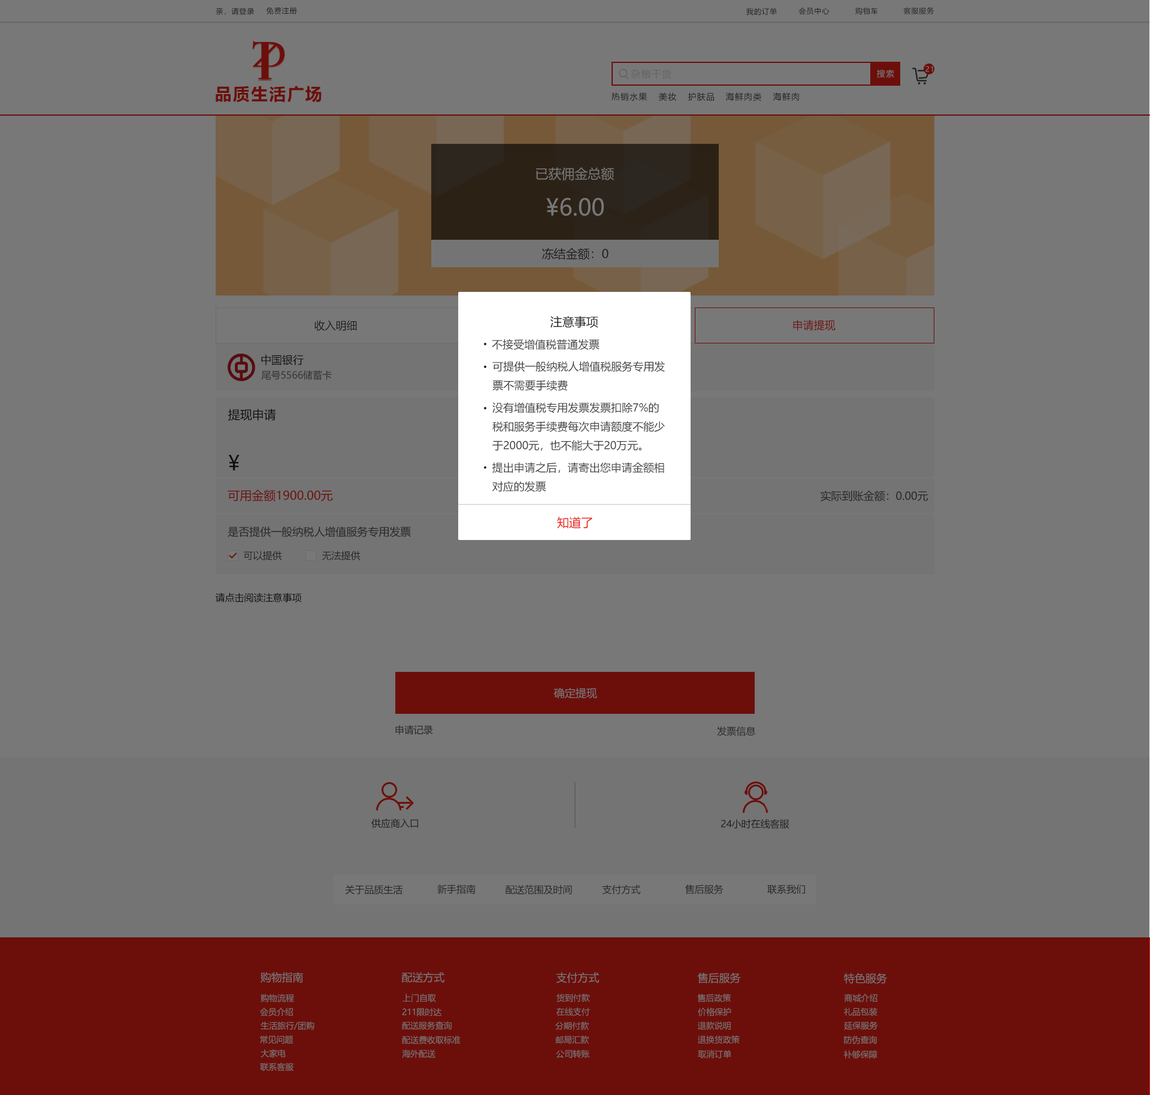
<style>
.page{position:relative;width:1150px;height:1095px;background:#787878}
.page>*{position:absolute;margin:0}
.t1{font:7.2px "MicrosoftYaHei";letter-spacing:0.08em;color:#1e1e1e}
.t2{font:7.2px "MicrosoftYaHei";letter-spacing:0.08em;color:#787878}
.t3{font:9.6px "MicrosoftYaHei";letter-spacing:0.08em;color:#656565}
.t4{font:8.4px "MicrosoftYaHei";letter-spacing:0.08em;color:#787878}
.t5{font:16.8px "MicrosoftYaHei-Bold";letter-spacing:0.08em;color:#6c0f0b}
.t6{font:8.4px "MicrosoftYaHei";letter-spacing:0.08em;color:#1e1e1e}
.t7{font:13.2px "MicrosoftYaHei";color:#787878}
.t8{font:22.8px "MicrosoftYaHei";color:#787878}
.t9{font:12px "MicrosoftYaHei";color:#1e1e1e}
.t10{font:12px "MicrosoftYaHei";color:#202020;text-transform:uppercase}
.t11{font:10.8px "MicrosoftYaHei";color:#1e1e1e}
.t12{font:10.8px "MicrosoftYaHei";color:#6c0f0b}
.t13{font:10.8px "MicrosoftYaHei";color:#404040;text-transform:uppercase}
.t14{font:10.8px "MicrosoftYaHei";color:#202020}
.t15{font:9.6px "MicrosoftYaHei";color:#303030}
.t16{font:12px "MicrosoftYaHei";color:#202020}
.t17{font:20.4px "MicrosoftYaHei";color:#202020}
.t18{font:12px "MicrosoftYaHei";color:#6c0f0b}
.t19{font:10.8px "MicrosoftYaHei";color:#262626}
.t20{font:12px "MicrosoftYaHei";color:#e61f18;text-transform:uppercase}
.t21{font:9.6px "MicrosoftYaHei";color:#262626}
.t22{font:9.6px "MicrosoftYaHei";color:#202020}
.t23{font:10.8px "MicrosoftYaHei";color:#787878}
.t24{font:9.6px "MicrosoftYaHei";color:#1e1e1e}
.t25{font:8.4px "MicrosoftYaHei";color:#787878}
</style>
<div class="page">
<p class="t1" style="left:216px;top:7px;width:38px;height:8px">亲，请登录</p>
<p class="t1" style="left:266px;top:7px;width:31px;height:7px">免费注册</p>
<p class="t1" style="left:747px;top:8px;width:30px;height:7px">我的订单</p>
<p class="t1" style="left:799px;top:7px;width:31px;height:8px">会员中心</p>
<p class="t1" style="left:856px;top:7px;width:22px;height:8px">购物车</p>
<p class="t1" style="left:904px;top:7px;width:31px;height:7px">客服服务</p>
<p class="t2" style="left:926px;top:66px;width:8px;height:6px">21</p>
<p class="t3" style="left:631px;top:69px;width:41px;height:10px">杂粮干货</p>
<p class="t4" style="left:877px;top:70px;width:18px;height:8px">搜索</p>
<p class="t5" style="left:216px;top:86px;width:106px;height:16px">品质生活广场</p>
<p class="t6" style="left:612px;top:92px;width:36px;height:9px">热销水果</p>
<p class="t6" style="left:659px;top:92px;width:17px;height:9px">美妆</p>
<p class="t6" style="left:688px;top:92px;width:26px;height:9px">护肤品</p>
<p class="t6" style="left:726px;top:92px;width:36px;height:9px">海鲜肉类</p>
<p class="t6" style="left:773px;top:92px;width:26px;height:9px">海鲜肉</p>
<p class="t7" style="left:536px;top:167px;width:78px;height:13px">已获佣金总额</p>
<p class="t8" style="left:546px;top:198px;width:58px;height:18px">¥6.00</p>
<p class="t9" style="left:542px;top:247px;width:67px;height:13px">冻结金额：0</p>
<p class="t10" style="left:551px;top:316px;width:48px;height:12px">注意事项</p>
<p class="t11" style="left:315px;top:320px;width:42px;height:11px">收入明细</p>
<p class="t12" style="left:793px;top:320px;width:43px;height:11px">申请提现</p>
<p class="t13" style="left:492px;top:339px;width:108px;height:11px">不接受增值税普通发票</p>
<p class="t14" style="left:261px;top:354px;width:43px;height:12px">中国银行</p>
<p class="t13" style="left:493px;top:361px;width:172px;height:30px">可提供一般纳税人增值税服务专用发<br>票不需要手续费</p>
<p class="t15" style="left:261px;top:370px;width:71px;height:10px">尾号5566储蓄卡</p>
<p class="t16" style="left:228px;top:409px;width:48px;height:12px">提现申请</p>
<p class="t13" style="left:493px;top:402px;width:172px;height:49px">没有增值税专用发票发票扣除7%的<br>税和服务手续费每次申请额度不能少<br>于2000元，也不能大于20万元。</p>
<p class="t17" style="left:228px;top:455px;width:12px;height:15px">¥</p>
<p class="t13" style="left:493px;top:462px;width:172px;height:30px">提出申请之后，请寄出您申请金额相<br>对应的发票</p>
<p class="t18" style="left:228px;top:490px;width:105px;height:12px">可用金额1900.00元</p>
<p class="t19" style="left:821px;top:490px;width:108px;height:12px">实际到账金额：0.00元</p>
<p class="t20" style="left:557px;top:517px;width:36px;height:11px">知道了</p>
<p class="t19" style="left:228px;top:526px;width:183px;height:11px">是否提供一般纳税人增值服务专用发票</p>
<p class="t21" style="left:243px;top:551px;width:39px;height:9px">可以提供</p>
<p class="t21" style="left:322px;top:551px;width:39px;height:9px">无法提供</p>
<p class="t22" style="left:216px;top:593px;width:86px;height:9px">请点击阅读注意事项</p>
<p class="t23" style="left:554px;top:687px;width:43px;height:12px">确定提现</p>
<p class="t21" style="left:395px;top:725px;width:38px;height:10px">申请记录</p>
<p class="t21" style="left:717px;top:726px;width:39px;height:10px">发票信息</p>
<p class="t24" style="left:372px;top:818px;width:46px;height:10px">供应商入口</p>
<p class="t24" style="left:721px;top:819px;width:69px;height:10px">24小时在线客服</p>
<p class="t21" style="left:345px;top:884px;width:58px;height:11px">关于品质生活</p>
<p class="t21" style="left:437px;top:884px;width:39px;height:10px">新手指南</p>
<p class="t21" style="left:506px;top:884px;width:66px;height:11px">配送范围及时间</p>
<p class="t21" style="left:602px;top:884px;width:39px;height:10px">支付方式</p>
<p class="t21" style="left:685px;top:884px;width:39px;height:10px">售后服务</p>
<p class="t21" style="left:768px;top:884px;width:37px;height:10px">联系我们</p>
<p class="t23" style="left:261px;top:972px;width:42px;height:11px">购物指南</p>
<p class="t23" style="left:402px;top:972px;width:43px;height:11px">配送方式</p>
<p class="t23" style="left:557px;top:972px;width:43px;height:11px">支付方式</p>
<p class="t23" style="left:697px;top:972px;width:44px;height:11px">售后服务</p>
<p class="t23" style="left:844px;top:972px;width:43px;height:12px">特色服务</p>
<p class="t25" style="left:261px;top:993px;width:33px;height:9px">购物流程</p>
<p class="t25" style="left:403px;top:993px;width:33px;height:9px">上门自取</p>
<p class="t25" style="left:557px;top:993px;width:33px;height:9px">货到付款</p>
<p class="t25" style="left:697px;top:993px;width:34px;height:9px">售后政策</p>
<p class="t25" style="left:844px;top:993px;width:34px;height:9px">商城介绍</p>
<p class="t25" style="left:260px;top:1007px;width:33px;height:9px">会员介绍</p>
<p class="t25" style="left:402px;top:1007px;width:40px;height:9px">211限时达</p>
<p class="t25" style="left:557px;top:1007px;width:33px;height:9px">在线支付</p>
<p class="t25" style="left:698px;top:1007px;width:34px;height:9px">价格保护</p>
<p class="t25" style="left:844px;top:1007px;width:34px;height:9px">礼品包装</p>
<p class="t25" style="left:261px;top:1021px;width:54px;height:8px">生活旅行/团购</p>
<p class="t25" style="left:402px;top:1021px;width:50px;height:8px">配送服务查询</p>
<p class="t25" style="left:555px;top:1021px;width:34px;height:9px">分期付款</p>
<p class="t25" style="left:698px;top:1021px;width:33px;height:9px">退款说明</p>
<p class="t25" style="left:844px;top:1021px;width:34px;height:8px">延保服务</p>
<p class="t25" style="left:260px;top:1035px;width:34px;height:9px">常见问题</p>
<p class="t25" style="left:402px;top:1035px;width:59px;height:9px">配送费收取标准</p>
<p class="t25" style="left:556px;top:1035px;width:33px;height:9px">邮局汇款</p>
<p class="t25" style="left:698px;top:1035px;width:42px;height:9px">退换货政策</p>
<p class="t25" style="left:844px;top:1035px;width:33px;height:9px">防伪查询</p>
<p class="t25" style="left:261px;top:1049px;width:25px;height:9px">大家电</p>
<p class="t25" style="left:402px;top:1049px;width:34px;height:9px">海外配送</p>
<p class="t25" style="left:556px;top:1049px;width:34px;height:9px">公司转账</p>
<p class="t25" style="left:698px;top:1050px;width:34px;height:8px">取消订单</p>
<p class="t25" style="left:844px;top:1050px;width:34px;height:9px">补够保障</p>
<p class="t25" style="left:260px;top:1062px;width:34px;height:9px">联系客服</p>
</div>
